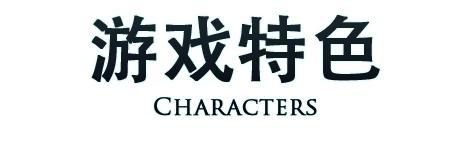
<style>
.page{position:relative;width:470px;height:142px;background:#ffffff}
.page>*{position:absolute;margin:0}
.t1{font:72px "AdobeHeitiStd-Regular";color:#202020;font-weight:bold}
.t2{font:24px "TrajanPro-Regular";color:#050812;font-weight:bold}
</style>
<div class="page">
<p class="t1" style="left:91px;top:15px;width:289px;height:68px">游戏特色</p>
<p class="t2" style="left:154px;top:97px;width:163px;height:19px">Characters</p>
</div>
